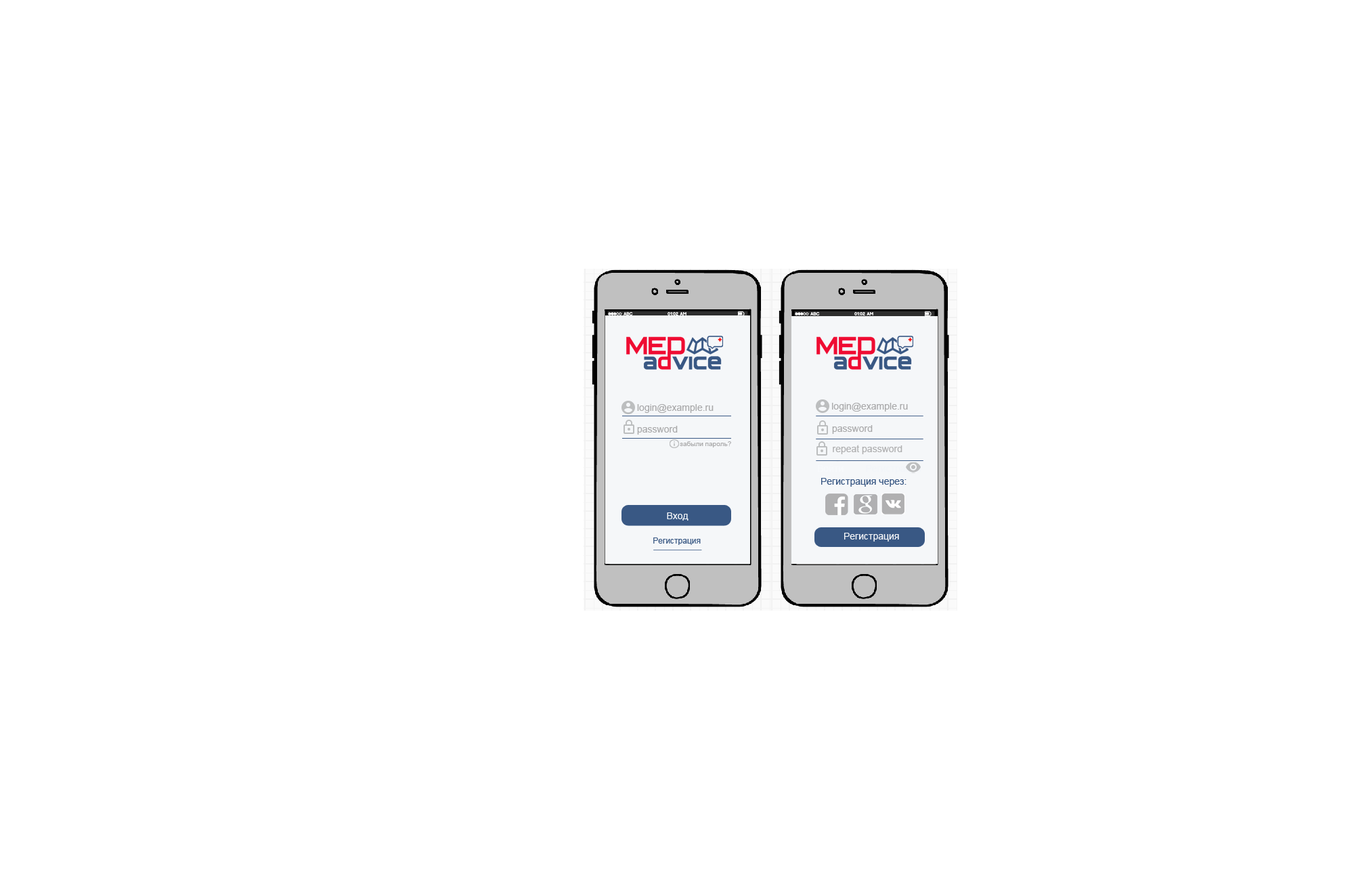
<style>
.page{position:relative;width:1354px;height:880px;background:#ffffff}
.page>*{position:absolute;margin:0}
.t1{font:9.5px "ArialMT";color:#ababac}
.t2{font:6.8px "ArialMT";color:#ababac}
.t3{font:9.5px "ArialMT";color:#b0b0b1}
.t4{font:9.5px "ArialMT";color:#395884}
.t5{font:9.5px "ArialMT";color:#f5f7f9}
.t6{font:9.5px "ArialMT";color:#f6f7f9}
.t7{font:8.1px "ArialMT";color:#395884}
</style>
<div class="page">
<p class="t1" style="left:637px;top:404px;width:77px;height:9px">login@example.ru</p>
<p class="t1" style="left:832px;top:403px;width:76px;height:9px">login@example.ru</p>
<p class="t1" style="left:637px;top:426px;width:41px;height:9px">password</p>
<p class="t1" style="left:832px;top:425px;width:41px;height:9px">password</p>
<p class="t2" style="left:680px;top:442px;width:51px;height:6px">забыли пароль?</p>
<p class="t3" style="left:833px;top:445px;width:70px;height:9px">repeat password</p>
<p class="t4" style="left:821px;top:478px;width:86px;height:9px">Регистрация через:</p>
<p class="t5" style="left:667px;top:513px;width:22px;height:8px">Вход</p>
<p class="t6" style="left:844px;top:533px;width:55px;height:9px">Регистрация</p>
<p class="t7" style="left:654px;top:538px;width:47px;height:7px">Регистрация</p>
</div>
